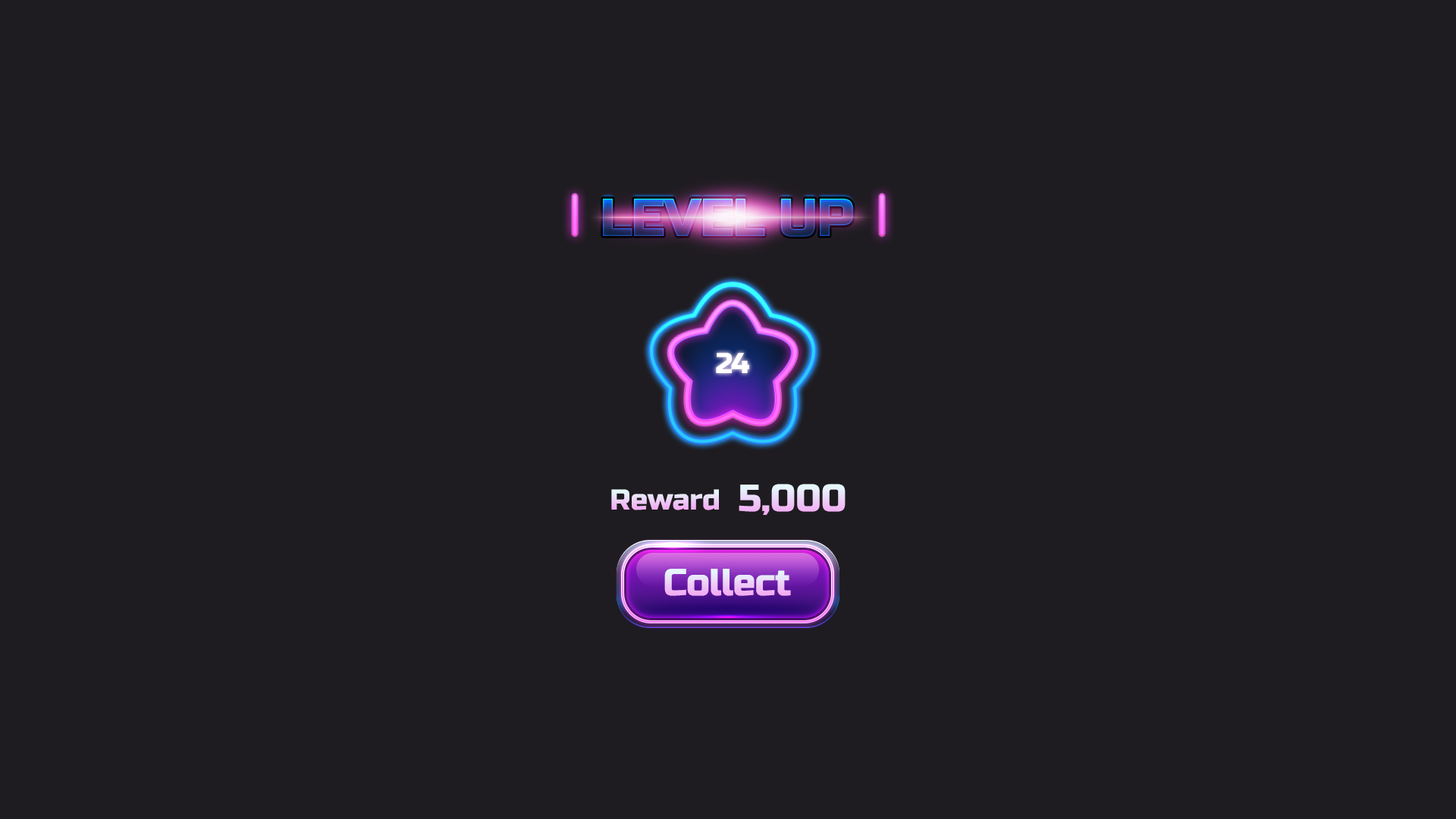
<style>
.page{position:relative;width:1456px;height:819px;background:#1e1c20}
.page>*{position:absolute;margin:0}
.t1{font:53.1px "RussoOne-Regular";letter-spacing:-0.025em;text-transform:uppercase}
.t2{font:28.8px "RussoOne-Regular";letter-spacing:-0.025em;color:#ffffff}
.t3{font:37.9px "RussoOne-Regular"}
.t4{font:28.8px "RussoOne-Regular"}
.t5{font:37.9px "RussoOne-Regular";letter-spacing:-0.025em}
</style>
<div class="page">
<p class="t1" style="left:603px;top:199px;width:250px;height:38px">Level Up</p>
<p class="t2" style="left:716px;top:353px;width:33px;height:20px">24</p>
<p class="t3" style="left:739px;top:484px;width:107px;height:31px">5,000</p>
<p class="t4" style="left:611px;top:489px;width:108px;height:21px">Reward</p>
<p class="t5" style="left:664px;top:569px;width:127px;height:27px">Collect</p>
</div>
